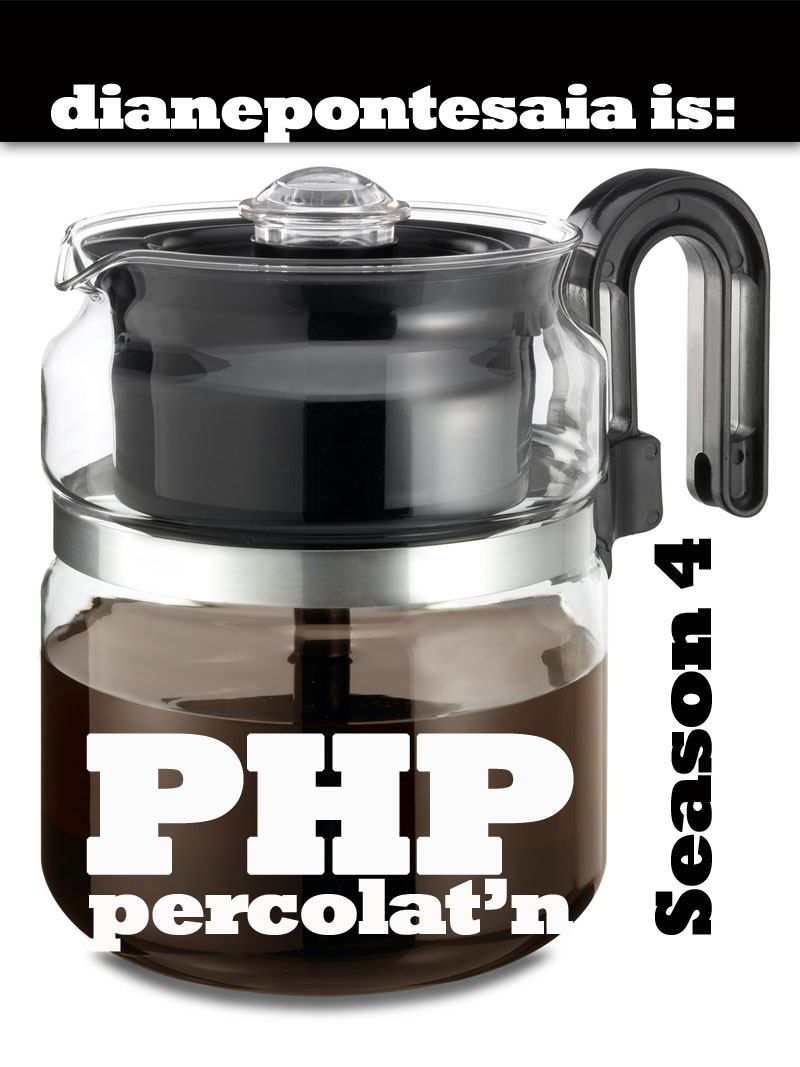
<style>
.page{position:relative;width:800px;height:1067px;background:#ffffff}
.page>*{position:absolute;margin:0}
.t1{font:64px "Rockwell-ExtraBold";letter-spacing:-0.05em;color:#ffffff;font-weight:bold}
.t2{font:80px "Rockwell-ExtraBold";letter-spacing:-0.05em;color:#030000;font-weight:bold}
.t3{font:80px/61.3px "Rockwell-ExtraBold";letter-spacing:-0.05em;color:#fdfafa;font-weight:bold}
.t4{font:266.7px/200px "Rockwell-ExtraBold";letter-spacing:-0.05em;color:#030000;font-weight:bold}
.t5{font:200px/96px "Rockwell-ExtraBold";letter-spacing:-0.05em;color:#fcfbfb;font-weight:bold}
</style>
<div class="page">
<p class="t1" style="left:51px;top:83px;width:684px;height:60px">dianepontesaia is:</p>
<p class="t2" style="left:654px;top:538px;width:58px;height:397px;rotate:-90deg">Season 4</p>
<p class="t3" style="left:86px;top:733px;width:488px;height:219px;text-align:center"><span class="t4"><br><br></span><span class="t5">PHP<br></span>percolat’n</p>
</div>
